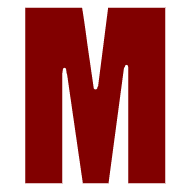
<style>
.page{position:relative;width:192px;height:192px;background:#810000}
.page>*{position:absolute;margin:0}
.t1{font:226.7px "Impact";color:#810000}
</style>
<div class="page">
<p class="t1" style="left:23px;top:5px;width:145px;height:181px">M</p>
</div>
